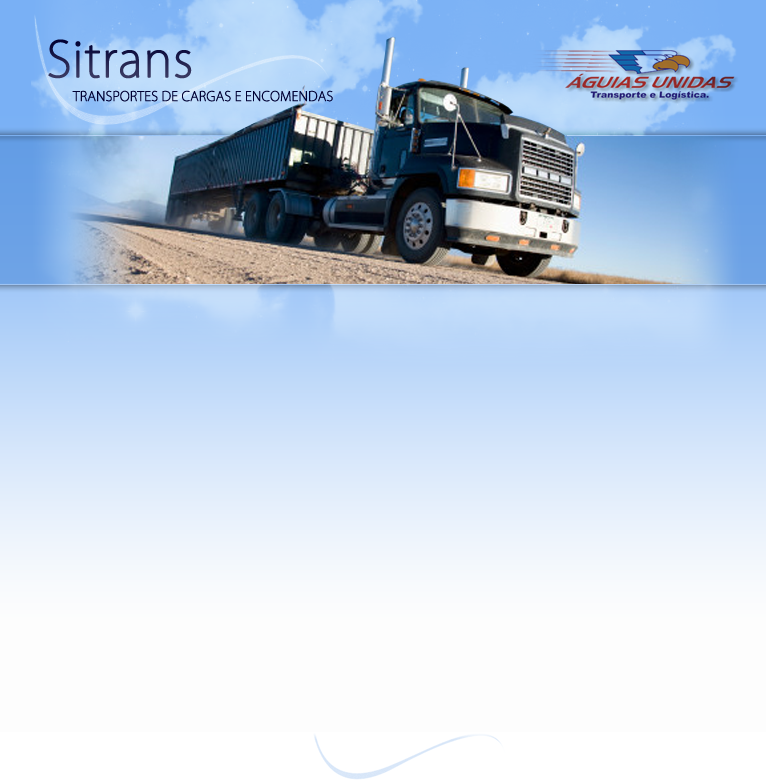
<style>
.page{position:relative;width:766px;height:780px}
.page>*{position:absolute;margin:0}
.t1{font:48px "KozGoPro-ExtraLight";color:#232350;font-weight:bold}
.t2{font:13px "KozGoPro-ExtraLight";color:#000033;font-weight:bold}
</style>
<div class="page">
<p class="t1" style="left:48px;top:39px;width:144px;height:40px">Sitrans</p>
<p class="t2" style="left:72px;top:90px;width:261px;height:12px">TRANSPORTES DE CARGAS E ENCOMENDAS</p>
</div>
